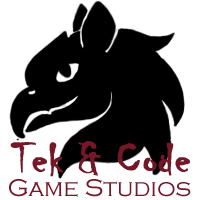
<style>
.page{position:relative;width:200px;height:200px;background:#ffffff}
.page>*{position:absolute;margin:0}
.t1{font:45.8px "Chiller-Regular";color:#741729;font-weight:bold}
.t2{font:25px "CopperplateGothic-Light";color:#741729}
</style>
<div class="page">
<p class="t1" style="left:10px;top:138px;width:180px;height:39px">Tek &amp; Code</p>
<p class="t2" style="left:9px;top:179px;width:182px;height:18px">Game Studios</p>
</div>
